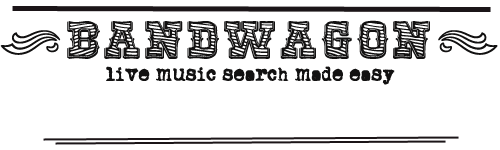
<style>
.page{position:relative;width:500px;height:150px;background:#ffffff}
.page>*{position:absolute;margin:0}
.t1{font:54px "RioGrandeStriped-Bold";letter-spacing:0.075em;color:#121111}
.t2{font:58px "DeLouisvilleSmallCaps";letter-spacing:0.075em;color:#121111}
.t3{font:16px "Oldtypewriter";letter-spacing:0.075em;color:#121111}
</style>
<div class="page">
<p class="t1" style="left:0px;top:20px;width:498px;height:39px"><span class="t2">&lt;</span>Bandwagon<span class="t2">&gt;</span></p>
<p class="t3" style="left:106px;top:66px;width:289px;height:19px">live music search made easy</p>
</div>
